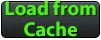
<style>
.page{position:relative;width:101px;height:40px}
.page>*{position:absolute;margin:0}
.t1{font:20px/21.1px "MyriadPro-Bold";color:#44fb04}
</style>
<div class="page">
<p class="t1" style="left:5px;top:0px;width:91px;height:37px;text-align:center">Load from Cache</p>
</div>
